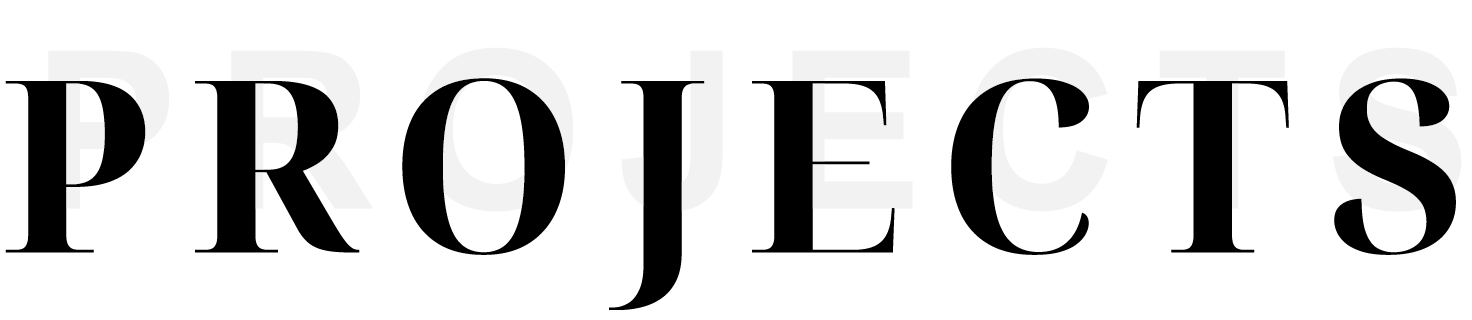
<style>
.page{position:relative;width:1472px;height:320px;background:#ffffff}
.page>*{position:absolute;margin:0}
.t1{font:240px "NotoSerifDisplay-Bold";letter-spacing:0.15em;color:#000000}
</style>
<div class="page">
<p class="t1" style="left:5px;top:78px;width:1451px;height:232px">PROJECTS</p>
</div>
